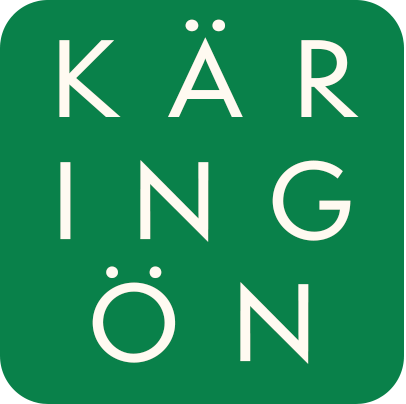
<style>
.page{position:relative;width:406px;height:404px;background:#09814a}
.page>*{position:absolute;margin:0}
.t1{font:101.5px "SemplicitaPro-Medium";letter-spacing:0.5em;color:#fffaf1}
</style>
<div class="page">
<p class="t1" style="left:59px;top:19px;width:300px;height:345px;text-align:center">KÄR<br>ING<br> ÖN</p>
</div>
